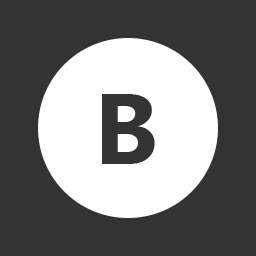
<style>
.page{position:relative;width:256px;height:256px;background:#333333}
.page>*{position:absolute;margin:0}
.t1{font:100px "MicrosoftNewTaiLue-Bold";color:#333333}
</style>
<div class="page">
<p class="t1" style="left:102px;top:94px;width:53px;height:70px">B</p>
</div>
